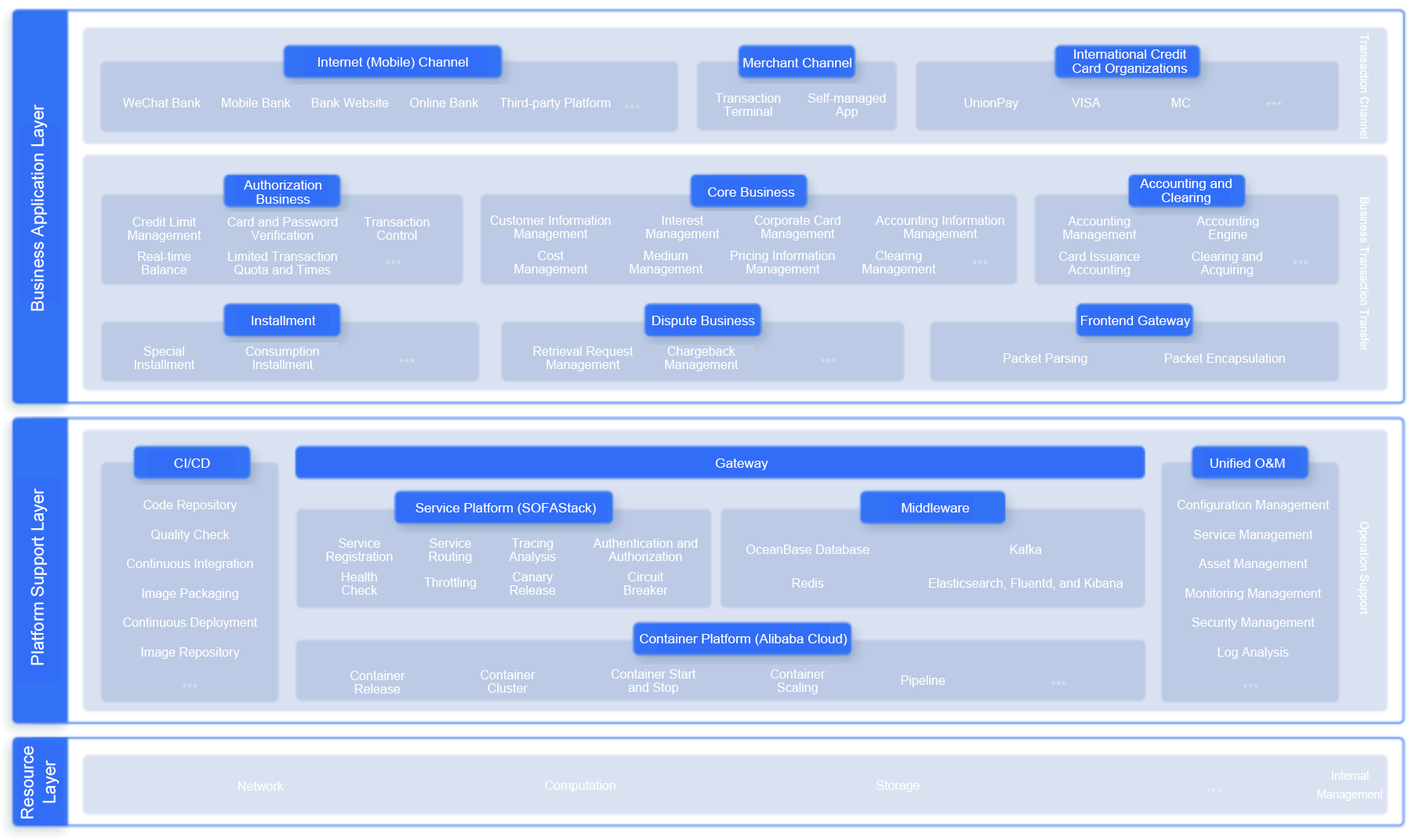
<style>
.page{position:relative;width:1419px;height:840px;background:#bccae5}
.page>*{position:absolute;margin:0}
.t1{font:11.4px "ArialMT";color:#ffffff}
.t2{font:13.4px/14.3px "ArialMT";color:#ffffff}
.t3{font:13.4px "ArialMT";color:#ffffff}
.t4{font:12.6px "ArialMT";color:#ffffff}
.t5{font:12.6px/13.5px "ArialMT";color:#ffffff}
.t6{font:17.2px "ArialMT";color:#ffffff}
.t7{font:12.6px/29.4px "ArialMT";color:#ffffff}
.t8{font:17.2px/22px "ArialMT";color:#ffffff}
.t9{font:11.4px/19px "ArialMT";color:#ffffff}
</style>
<div class="page">
<p class="t1" style="left:1359px;top:34px;width:11px;height:105px;rotate:90deg">Transaction Channel</p>
<p class="t2" style="left:1072px;top:49px;width:116px;height:26px;text-align:center">International Credit<br>Card Organizations</p>
<p class="t3" style="left:318px;top:57px;width:150px;height:12px">Internet (Mobile) Channel</p>
<p class="t3" style="left:743px;top:58px;width:108px;height:9px">Merchant Channel</p>
<p class="t4" style="left:123px;top:98px;width:78px;height:9px">WeChat Bank</p>
<p class="t4" style="left:222px;top:98px;width:69px;height:9px">Mobile Bank</p>
<p class="t4" style="left:311px;top:98px;width:78px;height:9px">Bank Website</p>
<p class="t4" style="left:410px;top:98px;width:68px;height:9px">Online Bank</p>
<p class="t4" style="left:499px;top:98px;width:112px;height:12px">Third-party Platform</p>
<p class="t5" style="left:715px;top:93px;width:66px;height:23px;text-align:center">Transaction<br>Terminal</p>
<p class="t5" style="left:808px;top:93px;width:78px;height:25px;text-align:center">Self-managed<br>App</p>
<p class="t4" style="left:964px;top:98px;width:54px;height:12px">UnionPay</p>
<p class="t4" style="left:1072px;top:98px;width:29px;height:9px">VISA</p>
<p class="t4" style="left:1171px;top:98px;width:19px;height:9px">MC</p>
<p class="t6" style="left:31px;top:104px;width:17px;height:207px;rotate:-90deg">Business Application Layer</p>
<p class="t2" style="left:244px;top:180px;width:77px;height:24px;text-align:center">Authorization<br>Business</p>
<p class="t2" style="left:1140px;top:179px;width:92px;height:26px;text-align:center">Accounting and<br>Clearing</p>
<p class="t3" style="left:708px;top:187px;width:87px;height:10px">Core Business</p>
<p class="t1" style="left:1359px;top:198px;width:10px;height:153px;rotate:90deg">Business Transaction Transfer</p>
<p class="t5" style="left:128px;top:217px;width:73px;height:25px;text-align:center">Credit Limit<br>Management</p>
<p class="t5" style="left:227px;top:217px;width:111px;height:23px;text-align:center">Card and Password<br>Verification</p>
<p class="t5" style="left:364px;top:217px;width:66px;height:23px;text-align:center">Transaction<br>Control</p>
<p class="t5" style="left:490px;top:216px;width:121px;height:25px;text-align:center">Customer Information<br>Management</p>
<p class="t5" style="left:646px;top:216px;width:74px;height:25px;text-align:center">Interest<br>Management</p>
<p class="t5" style="left:754px;top:216px;width:86px;height:25px;text-align:center">Corporate Card<br>Management</p>
<p class="t5" style="left:876px;top:216px;width:128px;height:25px;text-align:center">Accounting Information<br>Management</p>
<p class="t5" style="left:1063px;top:216px;width:74px;height:25px;text-align:center">Accounting<br>Management</p>
<p class="t5" style="left:1196px;top:216px;width:63px;height:25px;text-align:center">Accounting<br>Engine</p>
<p class="t5" style="left:138px;top:252px;width:53px;height:22px;text-align:center">Real-time<br>Balance</p>
<p class="t5" style="left:228px;top:252px;width:109px;height:23px;text-align:center">Limited Transaction<br>Quota and Times</p>
<p class="t5" style="left:514px;top:251px;width:74px;height:25px;text-align:center">Cost<br>Management</p>
<p class="t5" style="left:630px;top:251px;width:73px;height:25px;text-align:center">Medium<br>Management</p>
<p class="t5" style="left:731px;top:251px;width:104px;height:25px;text-align:center">Pricing Information<br>Management</p>
<p class="t5" style="left:862px;top:251px;width:74px;height:25px;text-align:center">Clearing<br>Management</p>
<p class="t5" style="left:1059px;top:252px;width:81px;height:25px;text-align:center">Card Issuance<br>Accounting</p>
<p class="t5" style="left:1192px;top:252px;width:70px;height:25px;text-align:center">Clearing and<br>Acquiring</p>
<p class="t3" style="left:252px;top:316px;width:64px;height:9px">Installment</p>
<p class="t3" style="left:652px;top:316px;width:103px;height:12px">Dispute Business</p>
<p class="t3" style="left:1081px;top:316px;width:110px;height:12px">Frontend Gateway</p>
<p class="t5" style="left:134px;top:346px;width:61px;height:23px;text-align:center">Special<br>Installment</p>
<p class="t5" style="left:245px;top:346px;width:74px;height:23px;text-align:center">Consumption<br>Installment</p>
<p class="t5" style="left:533px;top:346px;width:100px;height:26px;text-align:center">Retrieval Request<br>Management</p>
<p class="t5" style="left:665px;top:346px;width:73px;height:26px;text-align:center">Chargeback<br>Management</p>
<p class="t4" style="left:1003px;top:354px;width:84px;height:11px">Packet Parsing</p>
<p class="t4" style="left:1165px;top:354px;width:120px;height:11px">Packet Encapsulation</p>
<p class="t3" style="left:174px;top:459px;width:36px;height:9px">CI/CD</p>
<p class="t3" style="left:716px;top:459px;width:52px;height:11px">Gateway</p>
<p class="t3" style="left:1210px;top:459px;width:75px;height:9px">Unified O&amp;M</p>
<p class="t6" style="left:31px;top:488px;width:17px;height:178px;rotate:-90deg">Platform Support Layer</p>
<p class="t7" style="left:123px;top:500px;width:135px;height:159px;text-align:center">Code Repository<br>Quality Check<br>Continuous Integration<br>Image Packaging<br>Continuous Deployment<br>Image Repository</p>
<p class="t3" style="left:415px;top:503px;width:181px;height:12px">Service Platform (SOFAStack)</p>
<p class="t3" style="left:902px;top:503px;width:68px;height:10px">Middleware</p>
<p class="t7" style="left:1177px;top:500px;width:153px;height:159px;text-align:center">Configuration Management<br>Service Management<br>Asset Management<br>Monitoring Management<br>Security Management<br>Log Analysis</p>
<p class="t1" style="left:1358px;top:521px;width:12px;height:94px;rotate:90deg">Operation Support</p>
<p class="t5" style="left:326px;top:539px;width:67px;height:25px;text-align:center">Service<br>Registration</p>
<p class="t5" style="left:429px;top:539px;width:43px;height:25px;text-align:center">Service<br>Routing</p>
<p class="t5" style="left:509px;top:539px;width:47px;height:25px;text-align:center">Tracing<br>Analysis</p>
<p class="t5" style="left:593px;top:539px;width:105px;height:22px;text-align:center">Authentication and<br>Authorization</p>
<p class="t4" style="left:746px;top:545px;width:123px;height:9px">OceanBase Database</p>
<p class="t4" style="left:1010px;top:545px;width:32px;height:9px">Kafka</p>
<p class="t5" style="left:342px;top:572px;width:35px;height:23px;text-align:center">Health<br>Check</p>
<p class="t4" style="left:424px;top:578px;width:52px;height:12px">Throttling</p>
<p class="t5" style="left:510px;top:572px;width:46px;height:23px;text-align:center">Canary<br>Release</p>
<p class="t5" style="left:624px;top:572px;width:44px;height:23px;text-align:center">Circuit<br>Breaker</p>
<p class="t4" style="left:792px;top:579px;width:32px;height:9px">Redis</p>
<p class="t4" style="left:929px;top:579px;width:194px;height:11px">Elasticsearch, Fluentd, and Kibana</p>
<p class="t3" style="left:640px;top:634px;width:207px;height:12px">Container Platform (Alibaba Cloud)</p>
<p class="t5" style="left:350px;top:671px;width:55px;height:23px;text-align:center">Container<br>Release</p>
<p class="t5" style="left:481px;top:670px;width:54px;height:23px;text-align:center">Container<br>Cluster</p>
<p class="t5" style="left:611px;top:669px;width:85px;height:26px;text-align:center">Container Start<br>and Stop</p>
<p class="t5" style="left:771px;top:669px;width:54px;height:26px;text-align:center">Container<br>Scaling</p>
<p class="t4" style="left:901px;top:676px;width:44px;height:12px">Pipeline</p>
<p class="t8" style="left:20px;top:746px;width:40px;height:73px;text-align:center;rotate:-90deg">Resource<br>Layer</p>
<p class="t9" style="left:1317px;top:771px;width:67px;height:30px;text-align:center">Internal<br>Management</p>
<p class="t4" style="left:238px;top:782px;width:46px;height:9px">Network</p>
<p class="t4" style="left:545px;top:781px;width:70px;height:12px">Computation</p>
<p class="t4" style="left:876px;top:781px;width:44px;height:12px">Storage</p>
</div>
